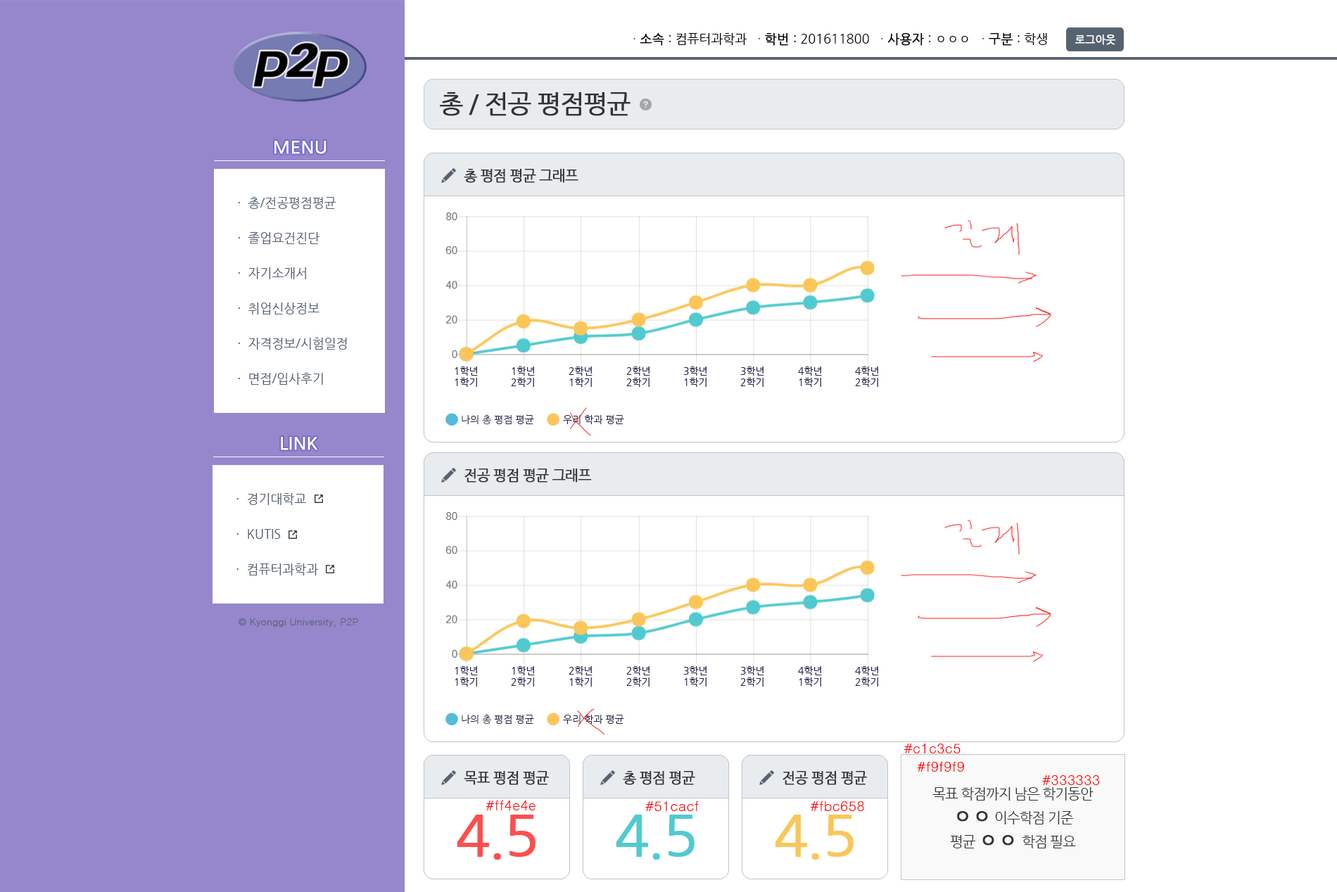
<style>
.page{position:relative;width:1337px;height:892px;background:#ffffff}
.page>*{position:absolute;margin:0}
.t1{font:12.7px "NanumGothic";color:#000000}
.t2{font:12.7px "NanumGothic";color:#566270}
.t3{font:12.7px "NanumGothic";color:#000000;font-weight:bold}
.t4{font:10.6px "NanumGothic";color:#ffffff;font-weight:bold}
.t5{font:25.3px "NanumGothic";letter-spacing:-0.05em;color:#333333;font-weight:bold}
.t6{font:17.6px "NanumGothic";color:#ffffff;font-weight:bold}
.t7{font:14.1px "NanumGothic";letter-spacing:-0.05em;color:#333333;font-weight:bold}
.t8{font:12.7px/35.2px "NanumGothic";color:#566270}
.t9{font:9.8px "NanumGothic";color:#25244c}
.t10{font:9.8px "Dotum";color:#566270}
.t11{font:14.1px "Dotum";color:#ff0000}
.t12{font:14.1px/18.3px "NanumGothic";letter-spacing:-0.05em;color:#333333}
.t13{font:21.1px/21.1px "NanumGothic";letter-spacing:-0.05em;color:#333333;font-weight:bold}
.t14{font:14.1px/21.1px "NanumGothic";letter-spacing:-0.05em;color:#333333}
.t15{font:14.1px/23.9px "NanumGothic";letter-spacing:-0.05em;color:#333333}
.t16{font:21.1px/23.9px "NanumGothic";letter-spacing:-0.05em;color:#333333;font-weight:bold}
.t17{font:56.3px "NanumGothic";letter-spacing:-0.05em;color:#ff4e4e;font-weight:bold}
.t18{font:56.3px "NanumGothic";letter-spacing:-0.05em;color:#51cacf;font-weight:bold}
.t19{font:56.3px "NanumGothic";letter-spacing:-0.05em;color:#fbc658;font-weight:bold}
</style>
<div class="page">
<p class="t1" style="left:633px;top:33px;width:414px;height:13px"><span class="t2">· </span><span class="t3">소속</span> : 컴퓨터과학과   <span class="t2">· </span><span class="t3">학번 </span>: 201611800   <span class="t2">· </span><span class="t3">사용자</span> : ㅇㅇㅇ   <span class="t2">· </span><span class="t3">구분</span> : 학생</p>
<p class="t4" style="left:1074px;top:34px;width:42px;height:11px">로그아웃</p>
<p class="t5" style="left:440px;top:92px;width:190px;height:24px">총 / 전공 평점평균</p>
<p class="t6" style="left:274px;top:141px;width:52px;height:13px">MENU</p>
<p class="t7" style="left:464px;top:169px;width:114px;height:14px">총 평점 평균 그래프</p>
<p class="t8" style="left:238px;top:197px;width:109px;height:188px">·  총/전공평점평균<br>·  졸업요건진단<br>·  자기소개서<br>·  취업신상정보<br>·  자격정보/시험일정<br>·  면접/입사후기</p>
<p class="t9" style="left:462px;top:414px;width:72px;height:11px">나의 총 평점 평균</p>
<p class="t9" style="left:563px;top:415px;width:61px;height:9px">우리 학과 평균</p>
<p class="t6" style="left:281px;top:437px;width:36px;height:13px">LINK</p>
<p class="t7" style="left:464px;top:469px;width:128px;height:14px">전공 평점 평균 그래프</p>
<p class="t8" style="left:236px;top:493px;width:82px;height:82px">·  경기대학교<br>·  KUTIS<br>·  컴퓨터과학과</p>
<p class="t10" style="left:238px;top:618px;width:120px;height:9px">© Kyonggi University, P2P</p>
<p class="t9" style="left:462px;top:714px;width:72px;height:11px">나의 총 평점 평균</p>
<p class="t9" style="left:563px;top:715px;width:61px;height:9px">우리 학과 평균</p>
<p class="t11" style="left:903px;top:744px;width:57px;height:9px">#c1c3c5</p>
<p class="t11" style="left:917px;top:762px;width:47px;height:10px">#f9f9f9</p>
<p class="t7" style="left:464px;top:771px;width:85px;height:14px">목표 평점 평균</p>
<p class="t7" style="left:623px;top:771px;width:72px;height:14px">총 평점 평균</p>
<p class="t7" style="left:782px;top:771px;width:85px;height:14px">전공 평점 평균</p>
<p class="t11" style="left:1042px;top:775px;width:58px;height:10px">#333333</p>
<p class="t12" style="left:932px;top:787px;width:161px;height:61px;text-align:center">목표 학점까지 남은 학기동안<br><span class="t13">ㅇㅇ</span><span class="t14"> 이수학점 기</span><span class="t15">준<br>평균 </span><span class="t16">ㅇㅇ </span><span class="t15">학점 필요</span></p>
<p class="t11" style="left:485px;top:801px;width:50px;height:9px">#ff4e4e</p>
<p class="t11" style="left:645px;top:801px;width:54px;height:10px">#51cacf</p>
<p class="t11" style="left:810px;top:801px;width:54px;height:10px">#fbc658</p>
<p class="t17" style="left:457px;top:815px;width:78px;height:45px">4.5</p>
<p class="t18" style="left:616px;top:815px;width:78px;height:45px">4.5</p>
<p class="t19" style="left:775px;top:815px;width:78px;height:45px">4.5</p>
</div>
